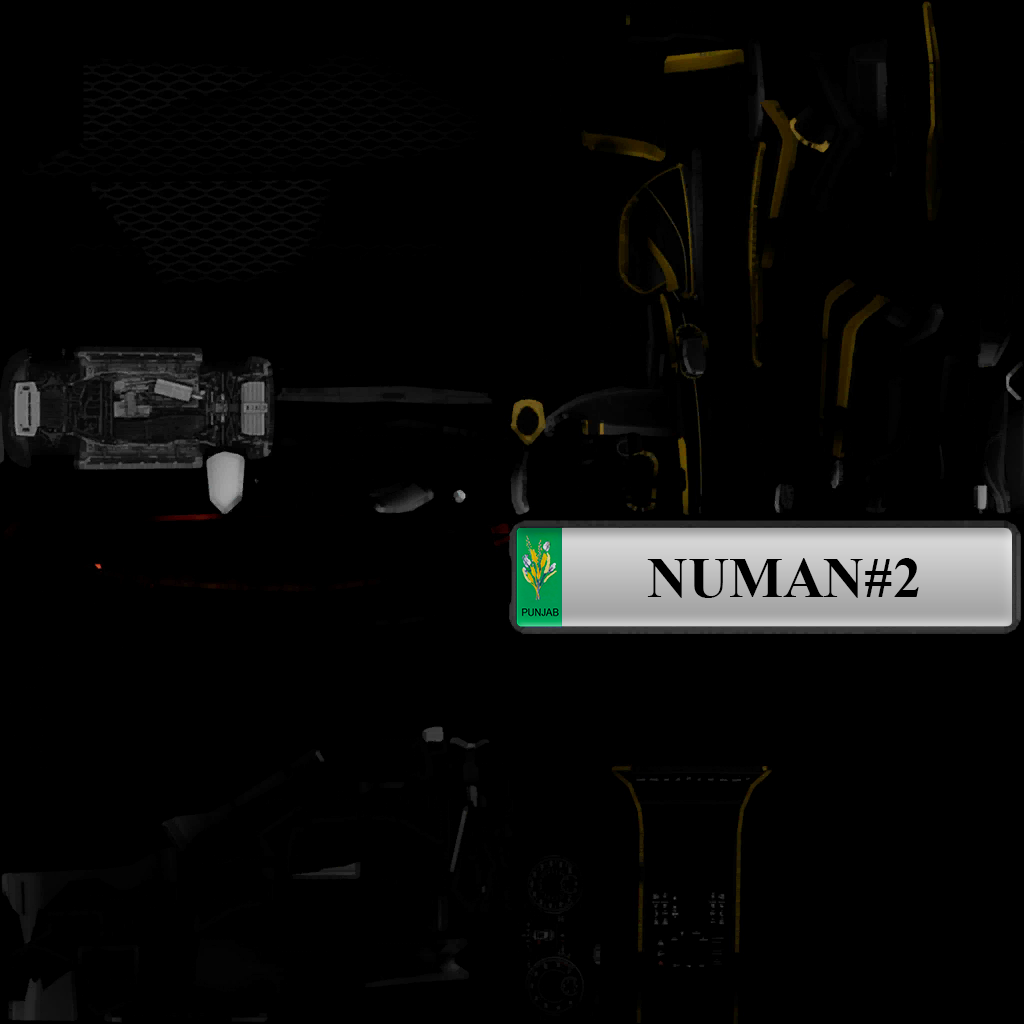
<style>
.page{position:relative;width:1024px;height:1024px;background:#000000}
.page>*{position:absolute;margin:0}
.t1{font:56.7px "TimesNewRomanPS-BoldMT";color:#000000;text-transform:uppercase}
</style>
<div class="page">
<p class="t1" style="left:647px;top:558px;width:272px;height:40px">Numan#2</p>
</div>
